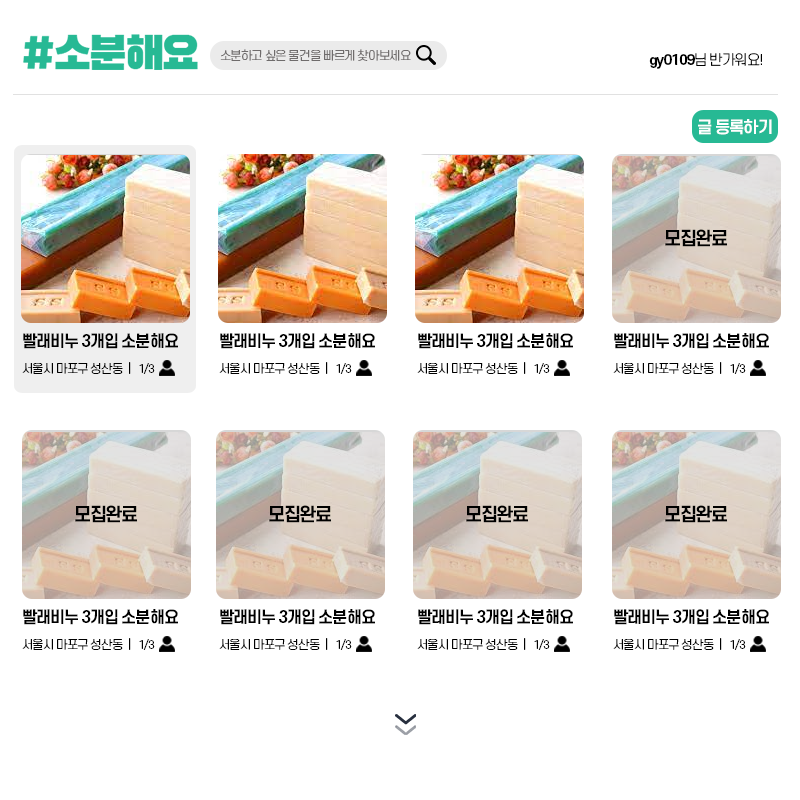
<style>
.page{position:relative;width:800px;height:800px;background:#ffffff}
.page>*{position:absolute;margin:0}
.t1{font:12px "S-CoreDream-3Light";letter-spacing:-0.075em;color:#6f6c6c}
.t2{font:14px "S-CoreDream-3Light";letter-spacing:-0.075em;color:#000000}
.t3{font:14px "S-CoreDream-6Bold";letter-spacing:-0.075em;color:#000000}
.t4{font:15.9px "S-CoreDream-6Bold";letter-spacing:-0.075em;color:#ffffff}
.t5{font:18px "S-CoreDream-6Bold";letter-spacing:-0.075em;color:#000000}
.t6{font:16px "S-CoreDream-6Bold";letter-spacing:-0.075em;color:#000000}
.t7{font:12px "S-CoreDream-3Light";letter-spacing:-0.075em;color:#000000}
.t8{font:11.2px "S-CoreDream-3Light";letter-spacing:-0.075em;color:#000000}
</style>
<div class="page">
<p class="t1" style="left:220px;top:49px;width:191px;height:12px">소분하고 싶은 물건을 빠르게 찾아보세요</p>
<p class="t2" style="left:649px;top:53px;width:113px;height:16px"><span class="t3">gy0109</span>님 반가워요!</p>
<p class="t4" style="left:698px;top:119px;width:74px;height:16px">글 등록하기</p>
<p class="t5" style="left:665px;top:229px;width:62px;height:18px">모집완료</p>
<p class="t6" style="left:23px;top:333px;width:155px;height:16px">빨래비누 3개입 소분해요</p>
<p class="t6" style="left:220px;top:333px;width:155px;height:16px">빨래비누 3개입 소분해요</p>
<p class="t6" style="left:418px;top:333px;width:155px;height:16px">빨래비누 3개입 소분해요</p>
<p class="t6" style="left:614px;top:333px;width:155px;height:16px">빨래비누 3개입 소분해요</p>
<p class="t7" style="left:22px;top:362px;width:109px;height:12px">서울시 마포구 성산동  |</p>
<p class="t8" style="left:139px;top:363px;width:16px;height:11px">1/3</p>
<p class="t7" style="left:219px;top:362px;width:109px;height:12px">서울시 마포구 성산동  |</p>
<p class="t8" style="left:336px;top:363px;width:16px;height:11px">1/3</p>
<p class="t7" style="left:417px;top:362px;width:109px;height:12px">서울시 마포구 성산동  |</p>
<p class="t8" style="left:534px;top:363px;width:16px;height:11px">1/3</p>
<p class="t7" style="left:613px;top:362px;width:109px;height:12px">서울시 마포구 성산동  |</p>
<p class="t8" style="left:730px;top:363px;width:16px;height:11px">1/3</p>
<p class="t5" style="left:75px;top:505px;width:62px;height:18px">모집완료</p>
<p class="t5" style="left:269px;top:505px;width:62px;height:18px">모집완료</p>
<p class="t5" style="left:466px;top:505px;width:62px;height:18px">모집완료</p>
<p class="t5" style="left:665px;top:505px;width:62px;height:18px">모집완료</p>
<p class="t6" style="left:23px;top:609px;width:155px;height:16px">빨래비누 3개입 소분해요</p>
<p class="t6" style="left:220px;top:609px;width:155px;height:16px">빨래비누 3개입 소분해요</p>
<p class="t6" style="left:418px;top:609px;width:155px;height:16px">빨래비누 3개입 소분해요</p>
<p class="t6" style="left:614px;top:609px;width:155px;height:16px">빨래비누 3개입 소분해요</p>
<p class="t7" style="left:22px;top:638px;width:109px;height:12px">서울시 마포구 성산동  |</p>
<p class="t8" style="left:139px;top:639px;width:16px;height:11px">1/3</p>
<p class="t7" style="left:219px;top:638px;width:109px;height:12px">서울시 마포구 성산동  |</p>
<p class="t8" style="left:336px;top:639px;width:16px;height:11px">1/3</p>
<p class="t7" style="left:417px;top:638px;width:109px;height:12px">서울시 마포구 성산동  |</p>
<p class="t8" style="left:534px;top:639px;width:16px;height:11px">1/3</p>
<p class="t7" style="left:613px;top:638px;width:109px;height:12px">서울시 마포구 성산동  |</p>
<p class="t8" style="left:730px;top:639px;width:16px;height:11px">1/3</p>
</div>
